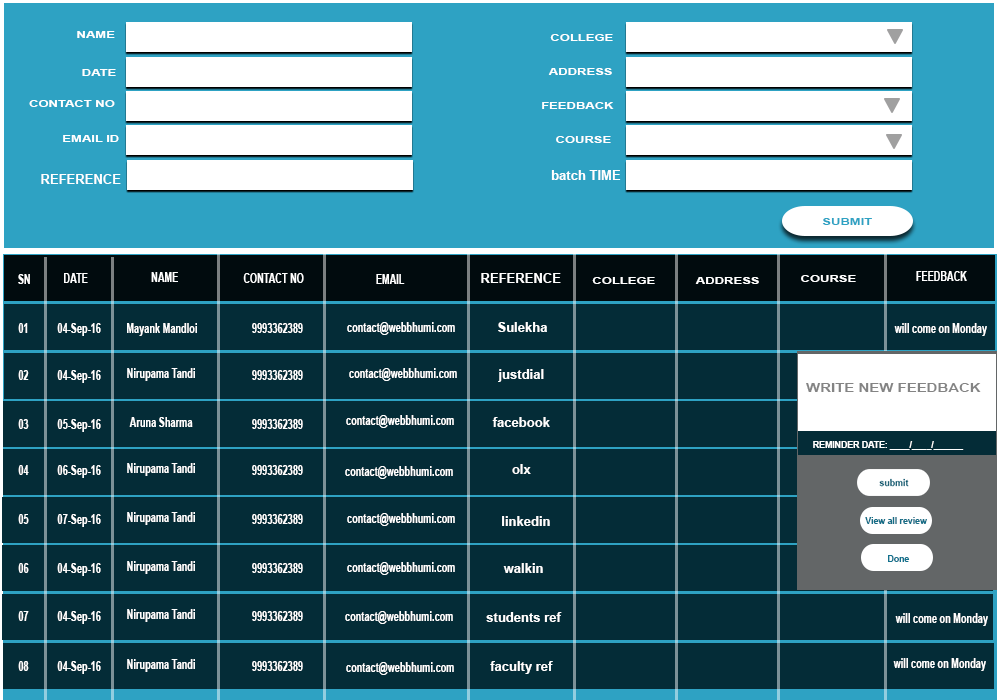
<style>
.page{position:relative;width:1000px;height:700px;background:#042c37}
.page>*{position:absolute;margin:0}
.t1{font:10px "Arial-BoldMT";color:#ffffff;scale:1.3 1}
.t2{font:12.9px "Arial-BoldMT";color:#ffffff}
.t3{font:10px "Arial-BoldMT";color:#2ea2c3;scale:1.3 1}
.t4{font:12.9px "Arial-BoldMT";color:#ffffff;scale:0.71 1}
.t5{font:12.2px "Arial-BoldMT";color:#848484;scale:1.22 1}
.t6{font:9.2px "Arial-BoldMT";color:#ffffff;scale:0.94 1}
.t7{font:9.2px "Arial-BoldMT";color:#156e87;scale:0.94 1}
.t8{font:9.2px "Arial-BoldMT";color:#13728d;scale:0.94 1}
</style>
<div class="page">
<p class="t1" style="left:77px;top:31px;width:38px;height:7px">NAME</p>
<p class="t1" style="left:550px;top:34px;width:63px;height:7px">COLLEGE</p>
<p class="t1" style="left:82px;top:69px;width:34px;height:7px">DATE</p>
<p class="t1" style="left:548px;top:68px;width:64px;height:7px">ADDRESS</p>
<p class="t1" style="left:29px;top:100px;width:86px;height:7px">CONTACT NO</p>
<p class="t1" style="left:542px;top:102px;width:72px;height:7px">FEEDBACK</p>
<p class="t1" style="left:63px;top:135px;width:56px;height:7px">EMAIL ID</p>
<p class="t1" style="left:556px;top:136px;width:55px;height:7px">COURSE</p>
<p class="t2" style="left:41px;top:174px;width:80px;height:10px">REFERENCE</p>
<p class="t2" style="left:551px;top:170px;width:70px;height:10px">batch TIME</p>
<p class="t3" style="left:822px;top:218px;width:50px;height:7px">SUBMIT</p>
<p class="t4" style="left:18px;top:274px;width:12px;height:10px">SN</p>
<p class="t4" style="left:64px;top:273px;width:24px;height:10px">DATE</p>
<p class="t4" style="left:151px;top:272px;width:27px;height:10px">NAME</p>
<p class="t4" style="left:243px;top:273px;width:61px;height:10px">CONTACT NO</p>
<p class="t4" style="left:376px;top:274px;width:29px;height:10px">EMAIL</p>
<p class="t2" style="left:481px;top:273px;width:80px;height:10px">REFERENCE</p>
<p class="t1" style="left:592px;top:277px;width:63px;height:7px">COLLEGE</p>
<p class="t1" style="left:695px;top:277px;width:64px;height:7px">ADDRESS</p>
<p class="t1" style="left:801px;top:275px;width:55px;height:7px">COURSE</p>
<p class="t4" style="left:916px;top:271px;width:51px;height:10px">FEEDBACK</p>
<p class="t4" style="left:18px;top:323px;width:10px;height:10px">01</p>
<p class="t4" style="left:57px;top:323px;width:44px;height:13px">04-Sep-16</p>
<p class="t4" style="left:127px;top:323px;width:70px;height:13px">Mayank Mandloi</p>
<p class="t4" style="left:252px;top:323px;width:51px;height:10px">9993362389</p>
<p class="t4" style="left:347px;top:322px;width:108px;height:13px">contact@webbhumi.com</p>
<p class="t2" style="left:498px;top:322px;width:49px;height:10px">Sulekha</p>
<p class="t4" style="left:894px;top:323px;width:93px;height:13px">will come on Monday</p>
<p class="t4" style="left:18px;top:370px;width:11px;height:10px">02</p>
<p class="t4" style="left:57px;top:370px;width:44px;height:13px">04-Sep-16</p>
<p class="t4" style="left:127px;top:368px;width:68px;height:13px">Nirupama Tandi</p>
<p class="t4" style="left:252px;top:370px;width:51px;height:10px">9993362389</p>
<p class="t4" style="left:349px;top:368px;width:108px;height:13px">contact@webbhumi.com</p>
<p class="t2" style="left:498px;top:369px;width:46px;height:13px">justdial</p>
<p class="t5" style="left:806px;top:383px;width:175px;height:9px">WRITE NEW FEEDBACK</p>
<p class="t4" style="left:18px;top:419px;width:11px;height:10px">03</p>
<p class="t4" style="left:57px;top:419px;width:44px;height:13px">05-Sep-16</p>
<p class="t4" style="left:129px;top:417px;width:64px;height:10px">Aruna Sharma</p>
<p class="t4" style="left:252px;top:419px;width:51px;height:10px">9993362389</p>
<p class="t4" style="left:346px;top:415px;width:108px;height:13px">contact@webbhumi.com</p>
<p class="t2" style="left:492px;top:417px;width:58px;height:10px">facebook</p>
<p class="t6" style="left:813px;top:441px;width:151px;height:9px">REMINDER DATE: ____/____/______</p>
<p class="t4" style="left:18px;top:465px;width:11px;height:10px">04</p>
<p class="t4" style="left:57px;top:465px;width:44px;height:13px">06-Sep-16</p>
<p class="t4" style="left:127px;top:463px;width:68px;height:13px">Nirupama Tandi</p>
<p class="t4" style="left:252px;top:465px;width:51px;height:10px">9993362389</p>
<p class="t4" style="left:345px;top:466px;width:108px;height:13px">contact@webbhumi.com</p>
<p class="t2" style="left:512px;top:464px;width:19px;height:10px">olx</p>
<p class="t4" style="left:18px;top:514px;width:11px;height:10px">05</p>
<p class="t4" style="left:57px;top:514px;width:44px;height:13px">07-Sep-16</p>
<p class="t4" style="left:127px;top:512px;width:68px;height:13px">Nirupama Tandi</p>
<p class="t4" style="left:252px;top:514px;width:51px;height:10px">9993362389</p>
<p class="t4" style="left:347px;top:513px;width:108px;height:13px">contact@webbhumi.com</p>
<p class="t2" style="left:502px;top:516px;width:48px;height:10px">linkedin</p>
<p class="t7" style="left:865px;top:517px;width:62px;height:7px">View all review</p>
<p class="t8" style="left:888px;top:555px;width:22px;height:7px">Done</p>
<p class="t4" style="left:18px;top:563px;width:11px;height:10px">06</p>
<p class="t4" style="left:57px;top:563px;width:44px;height:13px">04-Sep-16</p>
<p class="t4" style="left:127px;top:561px;width:68px;height:13px">Nirupama Tandi</p>
<p class="t4" style="left:252px;top:563px;width:51px;height:10px">9993362389</p>
<p class="t4" style="left:347px;top:562px;width:108px;height:13px">contact@webbhumi.com</p>
<p class="t2" style="left:503px;top:563px;width:40px;height:10px">walkin</p>
<p class="t4" style="left:18px;top:611px;width:11px;height:10px">07</p>
<p class="t4" style="left:57px;top:611px;width:44px;height:13px">04-Sep-16</p>
<p class="t4" style="left:127px;top:609px;width:68px;height:13px">Nirupama Tandi</p>
<p class="t4" style="left:252px;top:611px;width:51px;height:10px">9993362389</p>
<p class="t4" style="left:345px;top:611px;width:108px;height:13px">contact@webbhumi.com</p>
<p class="t2" style="left:486px;top:612px;width:76px;height:10px">students ref</p>
<p class="t4" style="left:895px;top:613px;width:93px;height:13px">will come on Monday</p>
<p class="t4" style="left:18px;top:661px;width:11px;height:10px">08</p>
<p class="t4" style="left:57px;top:661px;width:44px;height:13px">04-Sep-16</p>
<p class="t4" style="left:127px;top:659px;width:68px;height:13px">Nirupama Tandi</p>
<p class="t4" style="left:252px;top:661px;width:51px;height:10px">9993362389</p>
<p class="t4" style="left:346px;top:662px;width:108px;height:13px">contact@webbhumi.com</p>
<p class="t2" style="left:490px;top:661px;width:63px;height:13px">faculty ref</p>
<p class="t4" style="left:893px;top:658px;width:93px;height:13px">will come on Monday</p>
</div>
